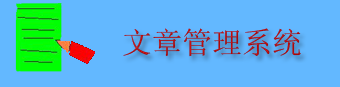
<style>
.page{position:relative;width:340px;height:87px;background:#63b8ff}
.page>*{position:absolute;margin:0}
.t1{font:30px "SimSun";color:#b60c0d}
</style>
<div class="page">
<p class="t1" style="left:123px;top:28px;width:178px;height:29px">文章管理系统</p>
</div>
